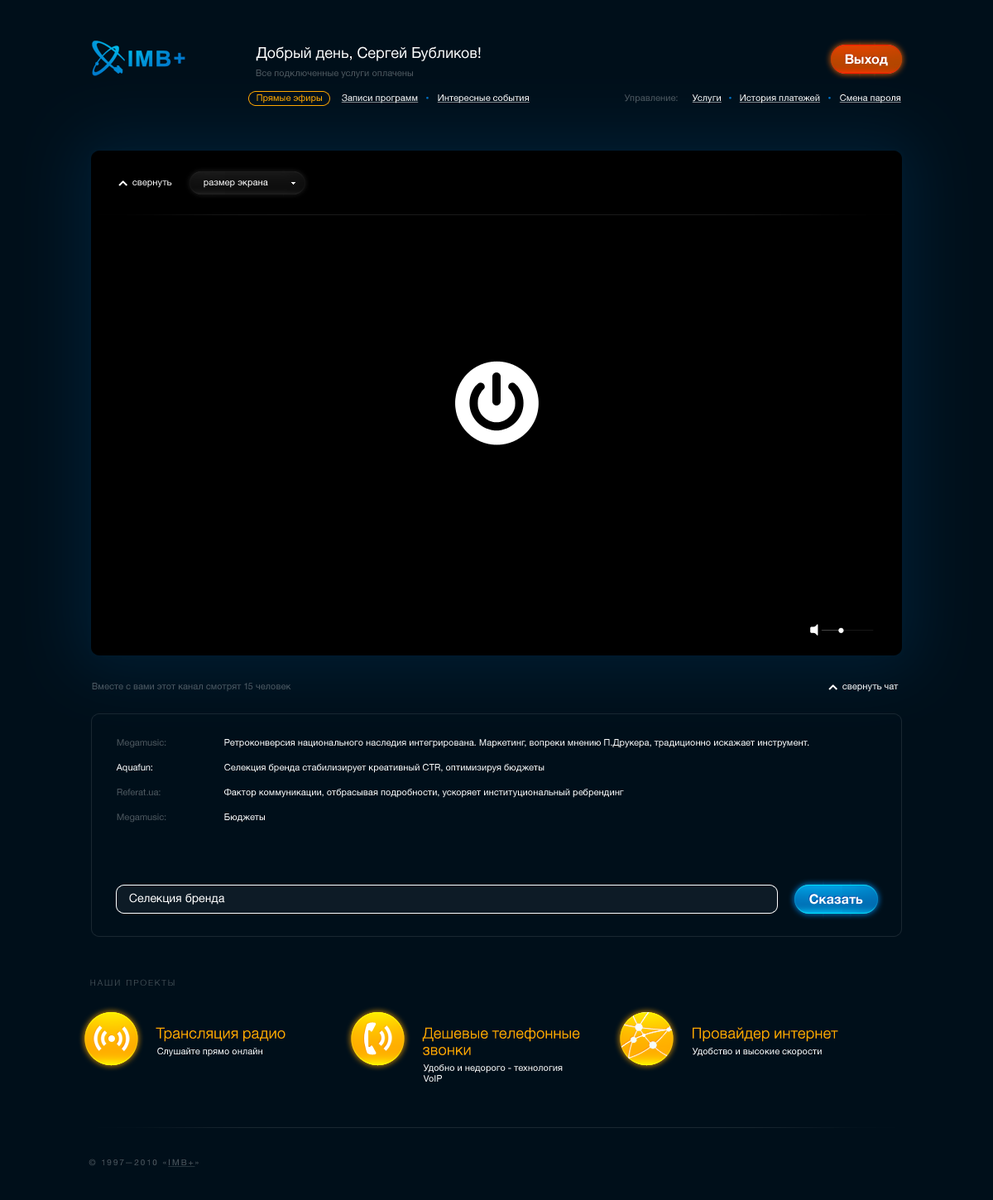
<style>
.page{position:relative;width:993px;height:1200px;background:#000f1a}
.page>*{position:absolute;margin:0}
.t1{font:14.9px "HelveticaNeue";color:#ffffff}
.t2{font:13.2px "HelveticaNeue-Bold";color:#ffffff}
.t3{font:9.1px "HelveticaNeue";color:#4d575f}
.t4{font:9.1px "HelveticaNeue";color:#ffa800}
.t5{font:9.1px "HelveticaNeue";color:#ffffff;text-decoration:underline}
.t6{font:9.1px "HelveticaNeue";color:#4d5961}
.t7{font:9.1px "HelveticaNeue";color:#ffffff}
.t8{font:9.1px "HelveticaNeue";color:#4d5a64}
.t9{font:11.6px "HelveticaNeue";color:#ffffff}
.t10{font:8.3px "HelveticaNeue-Light";letter-spacing:0.2em;color:#4d575f;text-transform:uppercase}
.t11{font:14.9px "HelveticaNeue-Light";color:#ffa800}
.t12{font:14.9px/16.6px "HelveticaNeue-Light";color:#ffa800}
.t13{font:8.3px "HelveticaNeue";letter-spacing:0.2em;color:#4d575f;text-transform:uppercase}
.t14{font:8.3px "HelveticaNeue";letter-spacing:0.2em;color:#4d575f;text-transform:uppercase;text-decoration:underline}
</style>
<div class="page">
<p class="t1" style="left:256px;top:46px;width:225px;height:15px">Добрый день, Сергей Бубликов!</p>
<p class="t2" style="left:845px;top:54px;width:43px;height:12px">Выход</p>
<p class="t3" style="left:256px;top:70px;width:157px;height:9px">Все подключенные услуги оплачены</p>
<p class="t4" style="left:257px;top:94px;width:65px;height:9px">Прямые эфиры</p>
<p class="t5" style="left:341px;top:94px;width:78px;height:9px">Записи программ</p>
<p class="t5" style="left:437px;top:94px;width:93px;height:9px">Интересные события</p>
<p class="t6" style="left:624px;top:94px;width:54px;height:9px">Управление:</p>
<p class="t5" style="left:692px;top:94px;width:30px;height:9px">Услуги</p>
<p class="t5" style="left:739px;top:94px;width:81px;height:9px">История платежей</p>
<p class="t5" style="left:839px;top:94px;width:63px;height:9px">Смена пароля</p>
<p class="t7" style="left:132px;top:180px;width:40px;height:8px">свернуть</p>
<p class="t7" style="left:204px;top:180px;width:64px;height:8px">размер экрана</p>
<p class="t8" style="left:92px;top:683px;width:199px;height:9px">Вместе с вами этот канал смотрят 15 человек</p>
<p class="t7" style="left:843px;top:685px;width:56px;height:7px">свернуть чат</p>
<p class="t3" style="left:117px;top:739px;width:49px;height:9px">Megamusic:</p>
<p class="t7" style="left:224px;top:739px;width:586px;height:9px">Ретроконверсия национального наследия интегрирована. Маркетинг, вопреки мнению П.Друкера, традиционно искажает инструмент.</p>
<p class="t7" style="left:116px;top:764px;width:36px;height:9px">Aquafun:</p>
<p class="t7" style="left:224px;top:764px;width:321px;height:9px">Селекция бренда стабилизирует креативный CTR, оптимизируя бюджеты</p>
<p class="t3" style="left:117px;top:789px;width:44px;height:7px">Referat.ua:</p>
<p class="t7" style="left:224px;top:789px;width:400px;height:9px">Фактор коммуникации, отбрасывая подробности, ускоряет институциональный ребрендинг</p>
<p class="t3" style="left:117px;top:814px;width:49px;height:9px">Megamusic:</p>
<p class="t7" style="left:224px;top:814px;width:41px;height:8px">Бюджеты</p>
<p class="t9" style="left:129px;top:893px;width:96px;height:12px">Селекция бренда</p>
<p class="t2" style="left:810px;top:894px;width:53px;height:11px">Сказать</p>
<p class="t10" style="left:90px;top:979px;width:85px;height:7px">Наши проекты</p>
<p class="t11" style="left:156px;top:1027px;width:130px;height:15px">Трансляция радио</p>
<p class="t12" style="left:422px;top:1027px;width:158px;height:28px">Дешевые телефонные<br>звонки</p>
<p class="t11" style="left:693px;top:1027px;width:146px;height:15px">Провайдер интернет</p>
<p class="t7" style="left:157px;top:1048px;width:105px;height:9px">Слушайте прямо онлайн</p>
<p class="t7" style="left:692px;top:1048px;width:130px;height:9px">Удобство и высокие скорости</p>
<p class="t7" style="left:423px;top:1065px;width:140px;height:17px">Удобно и недорого - технология<br>VoIP</p>
<p class="t13" style="left:89px;top:1159px;width:110px;height:8px">© 1997—2010 «<span class="t14">IMB+</span>»</p>
</div>
